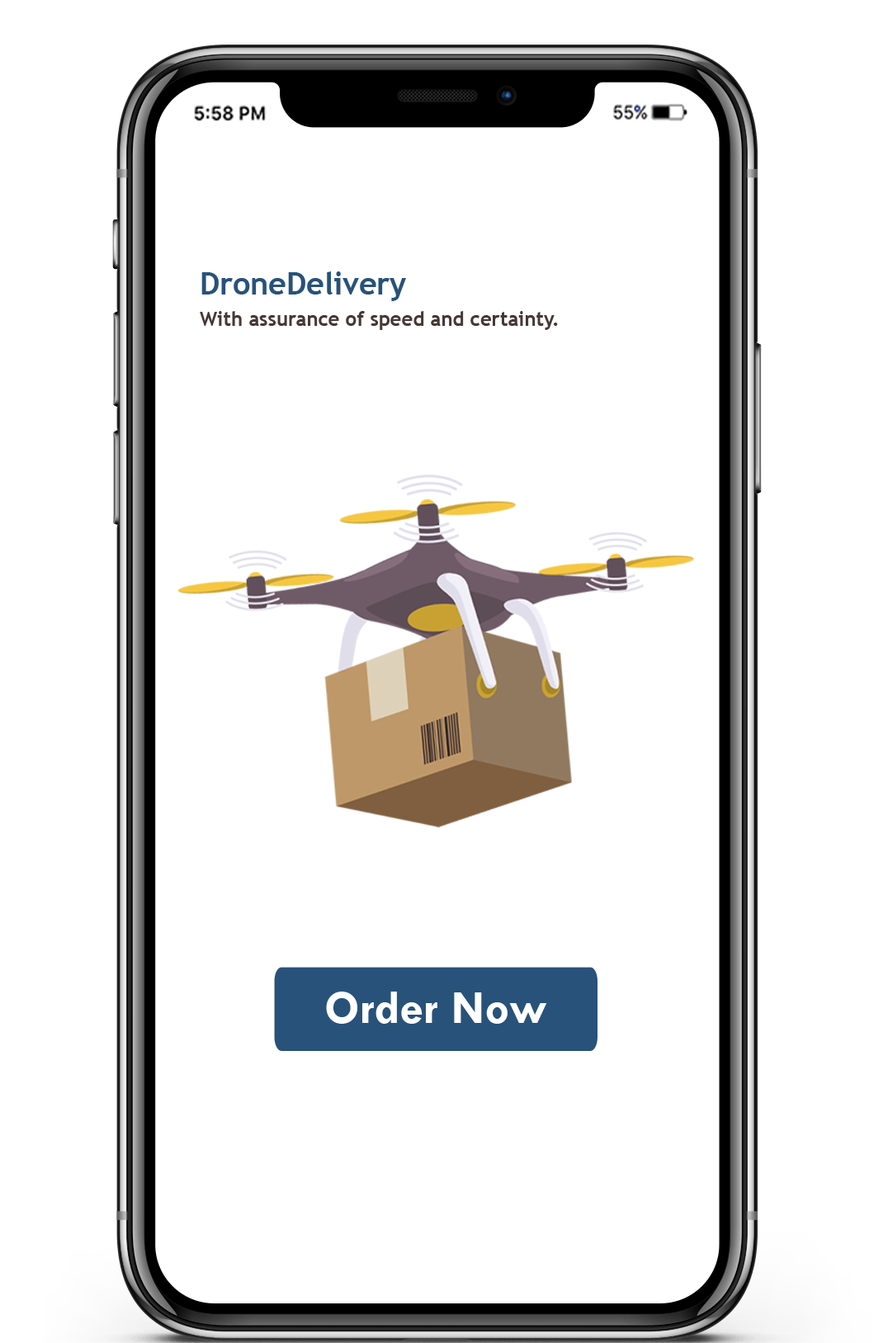
<style>
.page{position:relative;width:888px;height:1343px;background:#ffffff}
.page>*{position:absolute;margin:0}
.t1{font:30.9px "TrebuchetMS-Bold";color:#28527a}
.t2{font:19.8px "TrebuchetMS-Bold";color:#473737}
.t3{font:48.1px "TwCenMT-Bold";color:#ffffff}
</style>
<div class="page">
<p class="t1" style="left:201px;top:271px;width:205px;height:30px">DroneDelivery</p>
<p class="t2" style="left:200px;top:311px;width:358px;height:19px">With assurance of speed and certainty.</p>
<p class="t3" style="left:326px;top:992px;width:221px;height:32px">Order Now</p>
</div>
